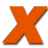
<style>
.page{position:relative;width:48px;height:48px;background:#ffffff}
.page>*{position:absolute;margin:0}
.t1{font:50px "Arial-Black";color:#e65400;font-weight:bold;font-style:italic}
</style>
<div class="page">
<p class="t1" style="left:2px;top:6px;width:46px;height:37px">X</p>
</div>
